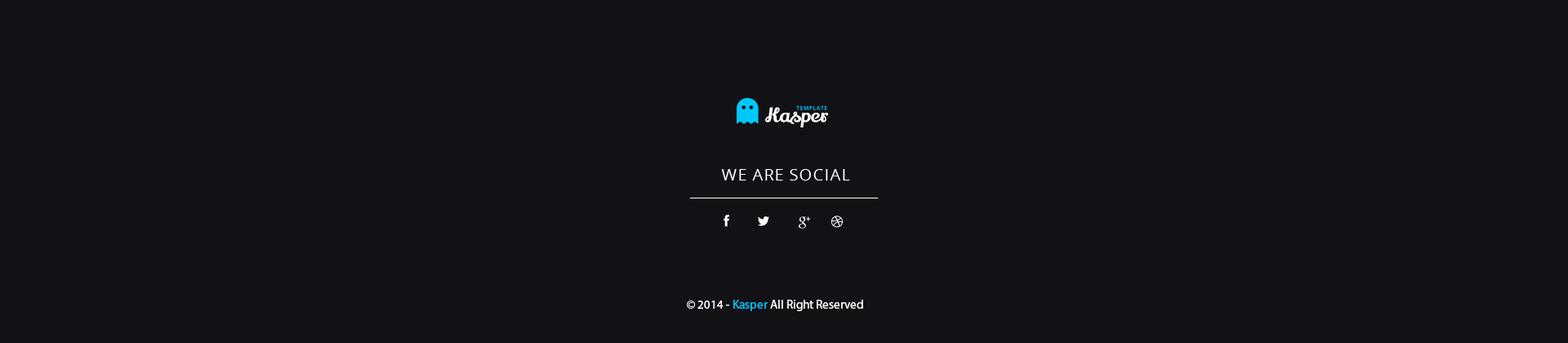
<style>
.page{position:relative;width:1568px;height:343px;background:#121116}
.page>*{position:absolute;margin:0}
.t1{font:16.3px "OpenSans";letter-spacing:0.05em;color:#ffffff}
.t2{font:12.2px "MyriadPro-Regular";color:#ffffff}
.t3{font:12.2px "MyriadPro-Regular";color:#00c7fc}
</style>
<div class="page">
<p class="t1" style="left:721px;top:169px;width:129px;height:11px">WE ARE SOCIAL</p>
<p class="t2" style="left:687px;top:300px;width:176px;height:11px">© 2014 - <span class="t3">Kasper </span>All Right Reserved</p>
</div>
